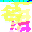
<style>
.page{position:relative;width:32px;height:32px}
.page>*{position:absolute;margin:0}
.t1{font:24px "FZJZK--GBK1-0";color:#f2fe6c}
.t2{font:24px "FZJZK--GBK1-0"}
</style>
<div class="page">
<p class="t1" style="left:1px;top:0px;width:22px;height:22px">茗</p>
<p class="t2" style="left:9px;top:9px;width:22px;height:22px">伊</p>
</div>
